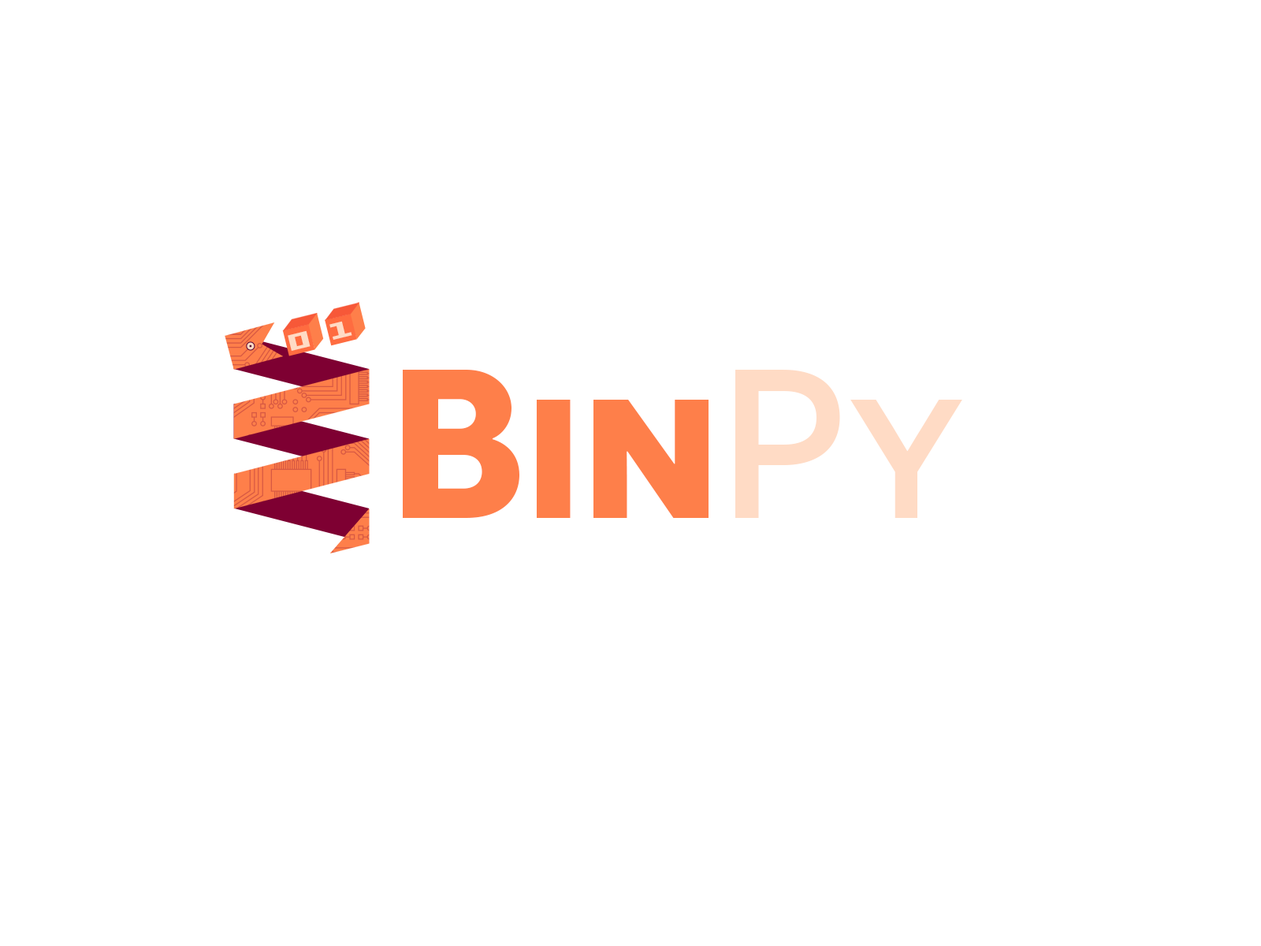
<style>
.page{position:relative;width:1261px;height:946px;background:#ffffff}
.page>*{position:absolute;margin:0}
.t1{font:50.4px "Minusio";letter-spacing:0.055em;color:#ffdbc5}
.t2{font:211.4px "Novecentosanswide-Bold";color:#fe7f4a}
.t3{font:211.4px "Novecentosanswide-Medium";color:#ffdbc5}
</style>
<div class="page">
<p class="t1" style="left:329px;top:321px;width:23px;height:19px;rotate:-14deg">1</p>
<p class="t1" style="left:288px;top:330px;width:23px;height:21px;rotate:-14deg">0</p>
<p class="t2" style="left:403px;top:370px;width:559px;height:148px">Bin<span class="t3">Py</span></p>
</div>
